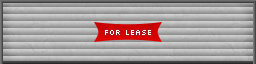
<style>
.page{position:relative;width:256px;height:64px}
.page>*{position:absolute;margin:0}
.t1{font:9px "Silkscreen";color:#ffffff}
</style>
<div class="page">
<p class="t1" style="left:105px;top:30px;width:46px;height:5px">for lease</p>
</div>
